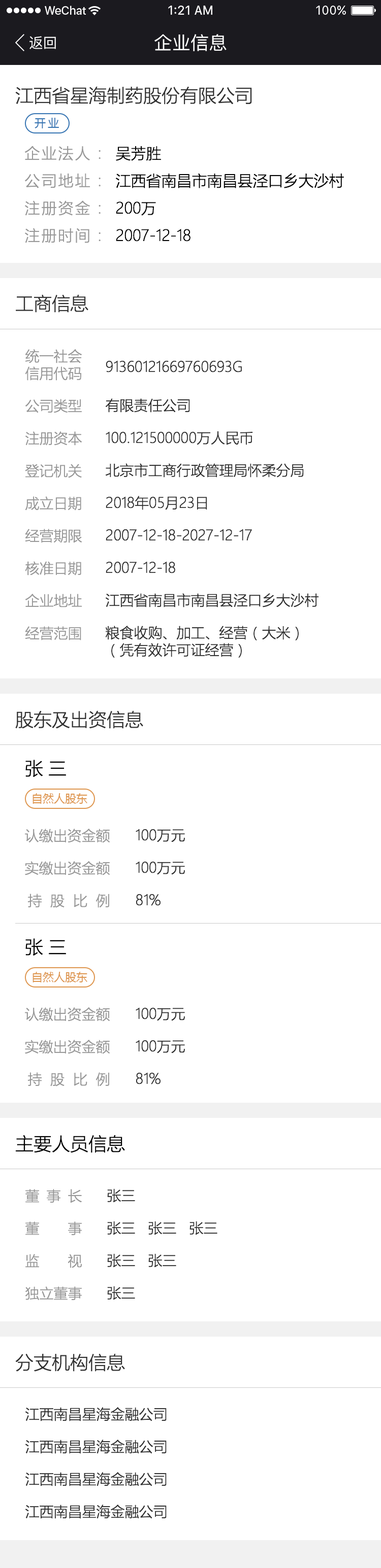
<style>
.page{position:relative;width:381px;height:1568px;background:#ffffff}
.page>*{position:absolute;margin:0}
.t1{font:14.2px "PingFang-SC-Medium";color:#ffffff}
.t2{font:18.3px "PingFang-SC-Medium";color:#ffffff}
.t3{font:18.3px "MicrosoftYaHeiLight";color:#333333}
.t4{font:11.2px "MicrosoftYaHei";letter-spacing:0.2em;color:#3674b2}
.t5{font:15.2px/29.4px "MicrosoftYaHeiLight";letter-spacing:0.1em;color:#999999}
.t6{font:15.2px/29.4px "MicrosoftYaHeiLight";color:#000000}
.t7{font:14.2px/34.5px "MicrosoftYaHeiLight";color:#999999}
.t8{font:14.2px/19.3px "MicrosoftYaHeiLight";color:#999999}
.t9{font:14.2px/34.5px "MicrosoftYaHeiLight";color:#333333}
.t10{font:14.2px/40.6px "MicrosoftYaHeiLight";color:#333333}
.t11{font:14.2px/19.3px "MicrosoftYaHeiLight";color:#333333}
.t12{font:18.3px "MicrosoftYaHeiLight";color:#000000}
.t13{font:11.2px "MicrosoftYaHei";color:#de964f}
.t14{font:14.2px/34.5px "MicrosoftYaHeiLight";letter-spacing:0.6em;color:#999999}
.t15{font:14.2px/34.5px "MicrosoftYaHeiLight";letter-spacing:2em;color:#999999}
.t16{font:14.2px/34.5px "MicrosoftYaHeiLight";letter-spacing:0.5em;color:#999999}
</style>
<div class="page">
<p class="t1" style="left:29px;top:36px;width:27px;height:13px">返回</p>
<p class="t2" style="left:154px;top:34px;width:72px;height:17px">企业信息</p>
<p class="t3" style="left:15px;top:86px;width:237px;height:19px">江西省星海制药股份有限公司</p>
<p class="t4" style="left:35px;top:118px;width:24px;height:10px">开业</p>
<p class="t5" style="left:24px;top:146px;width:76px;height:97px">企业法人 :<br>公司地址 :<br>注册资金 :<br>注册时间 :</p>
<p class="t6" style="left:115px;top:146px;width:229px;height:96px">吴芳胜<br>江西省南昌市南昌县泾口乡大沙村<br>200万<br>2007-12-18</p>
<p class="t3" style="left:16px;top:294px;width:72px;height:19px">工商信息</p>
<p class="t7" style="left:25px;top:349px;width:57px;height:291px"><span class="t8">统一社会<br>信用代码<br></span>公司类型<br>注册资本<br>登记机关<br>成立日期<br>经营期限<br>核准日期<br>企业地址<br>经营范围</p>
<p class="t9" style="left:105px;top:360px;width:214px;height:298px">91360121669760693G<br><span class="t10">有限责任公司<br></span>100.121500000万人民币<br>北京市工商行政管理局怀柔分局<br>2018年05月23日<br>2007-12-18-2027-12-17<br>2007-12-18<br>江西省南昌市南昌县泾口乡大沙村<br>粮食收购、加工、经营（大米）<br><span class="t11">（凭有效许可证经营）</span></p>
<p class="t3" style="left:15px;top:710px;width:128px;height:19px">股东及出资信息</p>
<p class="t12" style="left:25px;top:760px;width:41px;height:17px">张 三</p>
<p class="t13" style="left:32px;top:793px;width:55px;height:11px">自然人股东</p>
<p class="t7" style="left:25px;top:829px;width:85px;height:79px;text-align:right">认缴出资金额<br>实缴出资金额<br><span class="t14">持股比例</span></p>
<p class="t9" style="left:135px;top:829px;width:50px;height:77px">100万元<br>100万元<br>81%</p>
<p class="t12" style="left:25px;top:938px;width:41px;height:18px">张 三</p>
<p class="t13" style="left:32px;top:972px;width:55px;height:10px">自然人股东</p>
<p class="t7" style="left:25px;top:1007px;width:85px;height:79px;text-align:right">认缴出资金额<br>实缴出资金额<br><span class="t14">持股比例</span></p>
<p class="t9" style="left:135px;top:1007px;width:50px;height:77px">100万元<br>100万元<br>81%</p>
<p class="t12" style="left:15px;top:1135px;width:110px;height:18px">主要人员信息</p>
<p class="t15" style="left:25px;top:1189px;width:57px;height:111px;text-align:right"><span class="t16">董事长<br></span>董事<br>监视<br><span class="t7">独立董事</span></p>
<p class="t9" style="left:107px;top:1188px;width:110px;height:112px">张三<br>张三   张三   张三<br>张三   张三<br>张三</p>
<p class="t3" style="left:15px;top:1353px;width:110px;height:19px">分支机构信息</p>
<p class="t9" style="left:25px;top:1407px;width:141px;height:112px">江西南昌星海金融公司<br>江西南昌星海金融公司<br>江西南昌星海金融公司<br>江西南昌星海金融公司</p>
</div>
